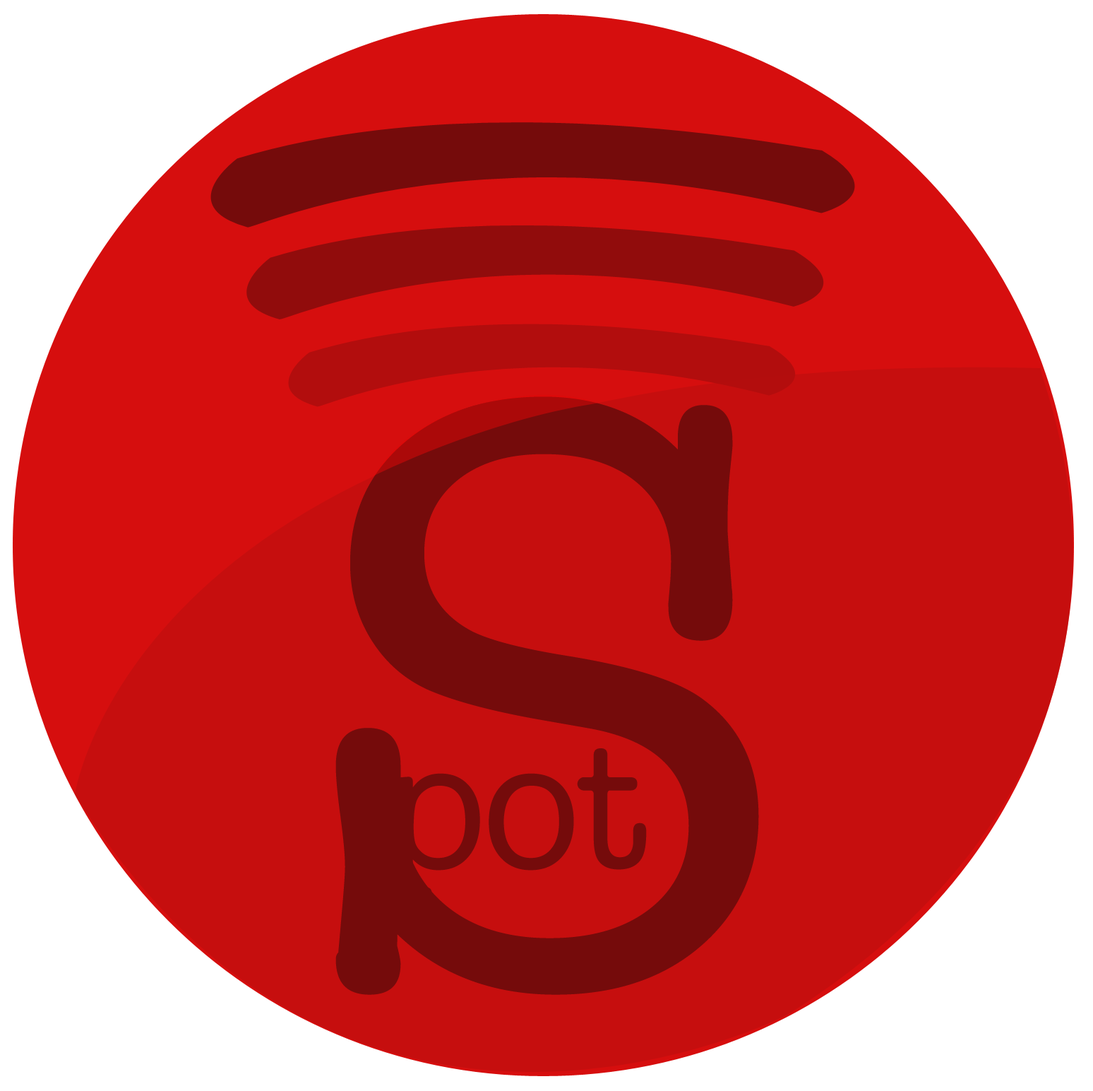
<style>
.page{position:relative;width:1093px;height:1091px;background:#c60e0e}
.page>*{position:absolute;margin:0}
.t1{font:840.4px "AmericanTypewriter";letter-spacing:-0.025em;color:#750b0b}
.t2{font:180.7px "AmericanTypewriter";letter-spacing:-0.025em;color:#750b0b}
</style>
<div class="page">
<p class="t1" style="left:336px;top:396px;width:423px;height:599px">S</p>
<p class="t2" style="left:380px;top:748px;width:267px;height:151px">pot</p>
</div>
